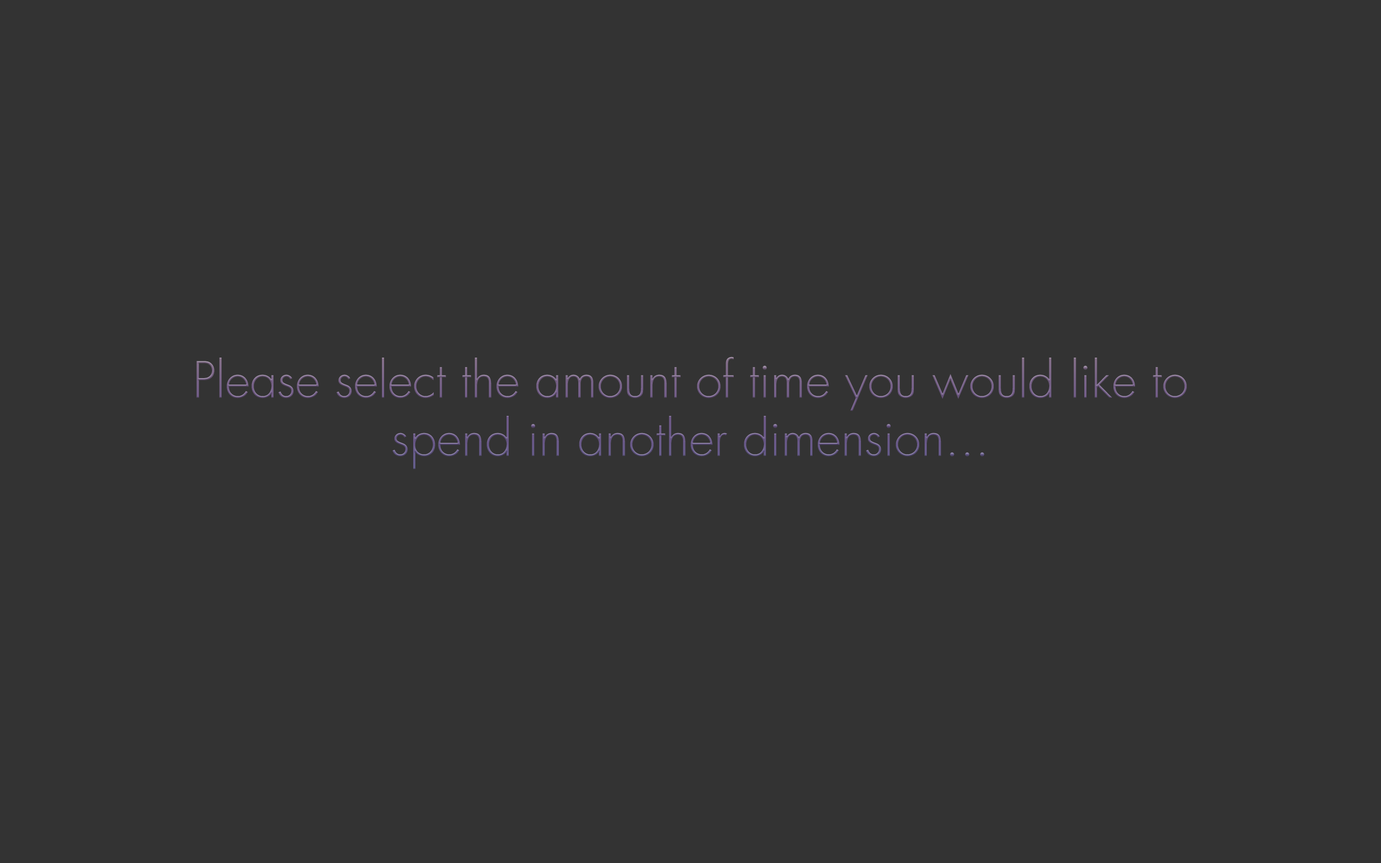
<style>
.page{position:relative;width:1381px;height:863px;background:#333333}
.page>*{position:absolute;margin:0}
.t1{font:48.6px "Futura-Light"}
</style>
<div class="page">
<p class="t1" style="left:196px;top:357px;width:991px;height:112px;text-align:center">Please select the amount of time you would like to spend in another dimension...</p>
</div>
